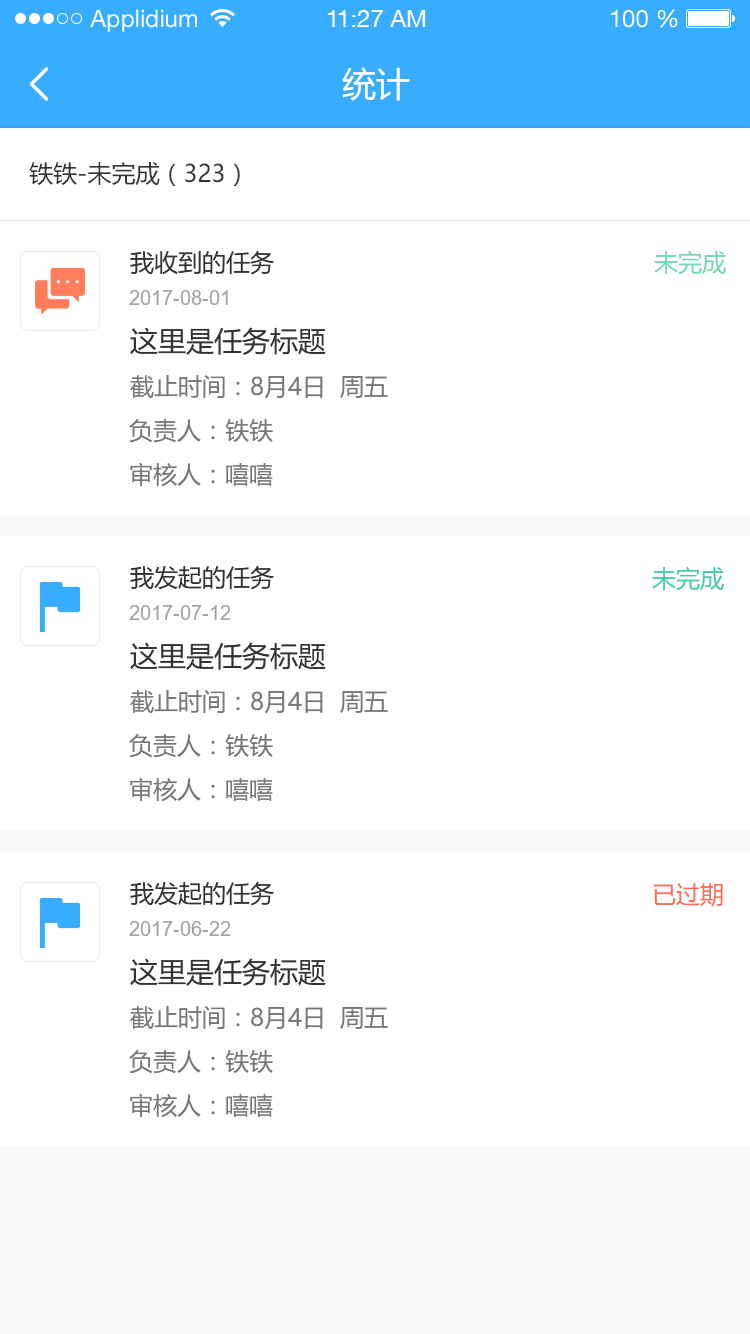
<style>
.page{position:relative;width:750px;height:1334px;background:#ffffff}
.page>*{position:absolute;margin:0}
.t1{font:24px "HelveticaNeueLTStd-Roman";color:#ffffff}
.t2{font:24px "HelveticaNeueCE-Roman";color:#ffffff}
.t3{font:34px "MicrosoftYaHei";color:#ffffff}
.t4{font:24px "MicrosoftYaHei";color:#333333}
.t5{font:24px "MicrosoftYaHei";color:#74d7bb}
.t6{font:20px "ArialMT";color:#a3a3a3}
.t7{font:28px "MicrosoftYaHei";color:#333333}
.t8{font:24px "MicrosoftYaHei";color:#777777}
.t9{font:24px "MicrosoftYaHei";color:#3fcca7}
.t10{font:24px "MicrosoftYaHei";color:#fd6c57}
</style>
<div class="page">
<p class="t1" style="left:90px;top:9px;width:107px;height:23px">Applidium</p>
<p class="t2" style="left:328px;top:10px;width:98px;height:17px">11:27 AM</p>
<p class="t1" style="left:611px;top:9px;width:67px;height:19px">100 %</p>
<p class="t3" style="left:342px;top:67px;width:68px;height:34px">统计</p>
<p class="t4" style="left:29px;top:162px;width:211px;height:24px">铁铁-未完成（323）</p>
<p class="t4" style="left:130px;top:250px;width:144px;height:25px">我收到的任务</p>
<p class="t5" style="left:654px;top:251px;width:72px;height:23px">未完成</p>
<p class="t6" style="left:129px;top:290px;width:99px;height:15px">2017-08-01</p>
<p class="t7" style="left:130px;top:327px;width:196px;height:28px">这里是任务标题</p>
<p class="t8" style="left:130px;top:375px;width:258px;height:24px">截止时间：8月4日  周五</p>
<p class="t8" style="left:129px;top:419px;width:144px;height:24px">负责人：铁铁</p>
<p class="t8" style="left:130px;top:462px;width:143px;height:25px">审核人：嘻嘻</p>
<p class="t4" style="left:130px;top:565px;width:144px;height:25px">我发起的任务</p>
<p class="t9" style="left:652px;top:567px;width:72px;height:23px">未完成</p>
<p class="t6" style="left:129px;top:605px;width:101px;height:15px">2017-07-12</p>
<p class="t7" style="left:130px;top:642px;width:196px;height:28px">这里是任务标题</p>
<p class="t8" style="left:130px;top:690px;width:258px;height:24px">截止时间：8月4日  周五</p>
<p class="t8" style="left:129px;top:734px;width:144px;height:24px">负责人：铁铁</p>
<p class="t8" style="left:130px;top:777px;width:143px;height:25px">审核人：嘻嘻</p>
<p class="t4" style="left:130px;top:881px;width:144px;height:25px">我发起的任务</p>
<p class="t10" style="left:653px;top:883px;width:70px;height:24px">已过期</p>
<p class="t6" style="left:129px;top:921px;width:101px;height:15px">2017-06-22</p>
<p class="t7" style="left:130px;top:958px;width:196px;height:28px">这里是任务标题</p>
<p class="t8" style="left:130px;top:1006px;width:258px;height:24px">截止时间：8月4日  周五</p>
<p class="t8" style="left:129px;top:1050px;width:144px;height:24px">负责人：铁铁</p>
<p class="t8" style="left:130px;top:1093px;width:143px;height:25px">审核人：嘻嘻</p>
</div>
